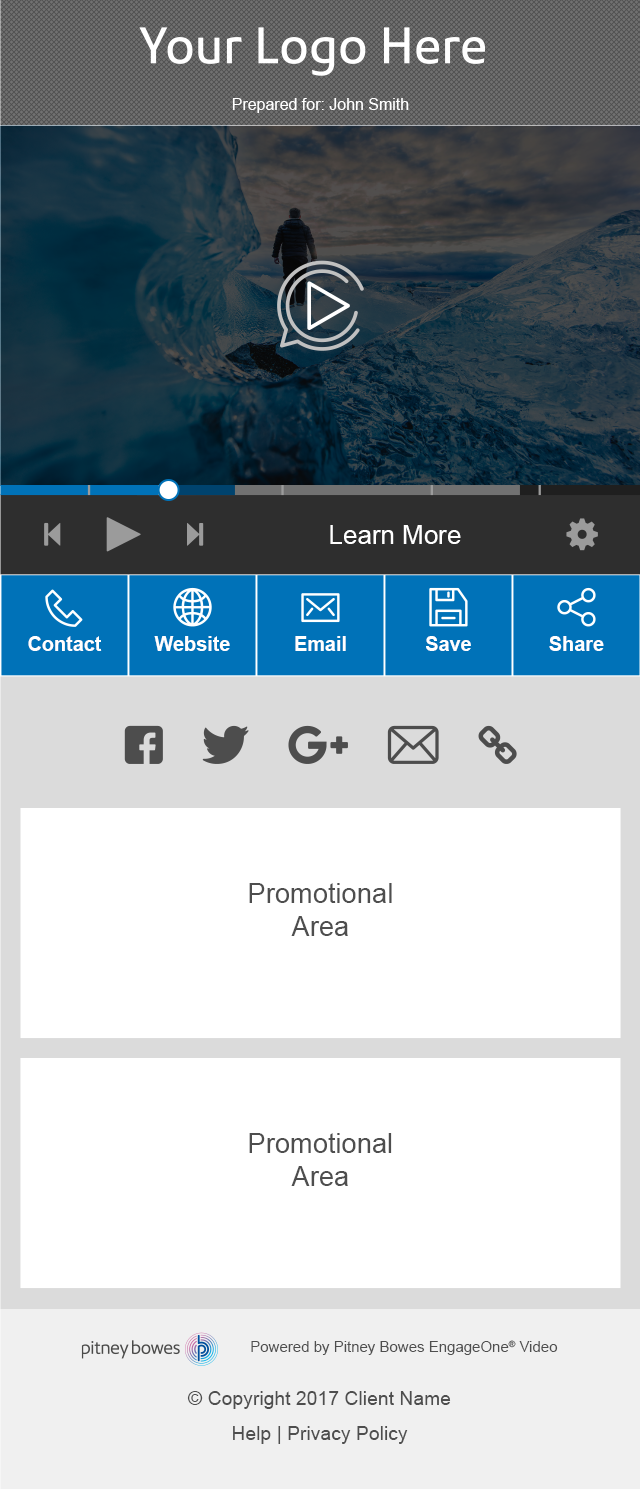
<style>
.page{position:relative;width:640px;height:1490px;background:#ffffff}
.page>*{position:absolute;margin:0}
.t1{font:16px "ArialMT";color:#ffffff}
.t2{font:26px "ArialMT";color:#ffffff}
.t3{font:20px "Arial-BoldMT";color:#ffffff}
.t4{font:27.3px "ArialMT";color:#4e4e4e}
.t5{font:15px "ArialMT";color:#4e4e4e}
.t6{font:19.3px "ArialMT";color:#4e4e4e}
</style>
<div class="page">
<p class="t1" style="left:232px;top:98px;width:177px;height:15px">Prepared for: John Smith</p>
<p class="t2" style="left:330px;top:525px;width:131px;height:19px">Learn More</p>
<p class="t3" style="left:28px;top:636px;width:74px;height:15px">Contact</p>
<p class="t3" style="left:154px;top:636px;width:76px;height:15px">Website</p>
<p class="t3" style="left:295px;top:636px;width:51px;height:15px">Email</p>
<p class="t3" style="left:426px;top:636px;width:45px;height:15px">Save</p>
<p class="t3" style="left:549px;top:636px;width:55px;height:15px">Share</p>
<p class="t4" style="left:249px;top:883px;width:143px;height:53px;text-align:center">Promotional <br>Area</p>
<p class="t4" style="left:249px;top:1133px;width:143px;height:53px;text-align:center">Promotional <br>Area</p>
<p class="t5" style="left:251px;top:1340px;width:307px;height:15px">Powered by Pitney Bowes EngageOne® Video</p>
<p class="t6" style="left:187px;top:1391px;width:264px;height:18px">© Copyright 2017 Client Name</p>
<p class="t6" style="left:233px;top:1426px;width:175px;height:18px">Help | Privacy Policy</p>
</div>
